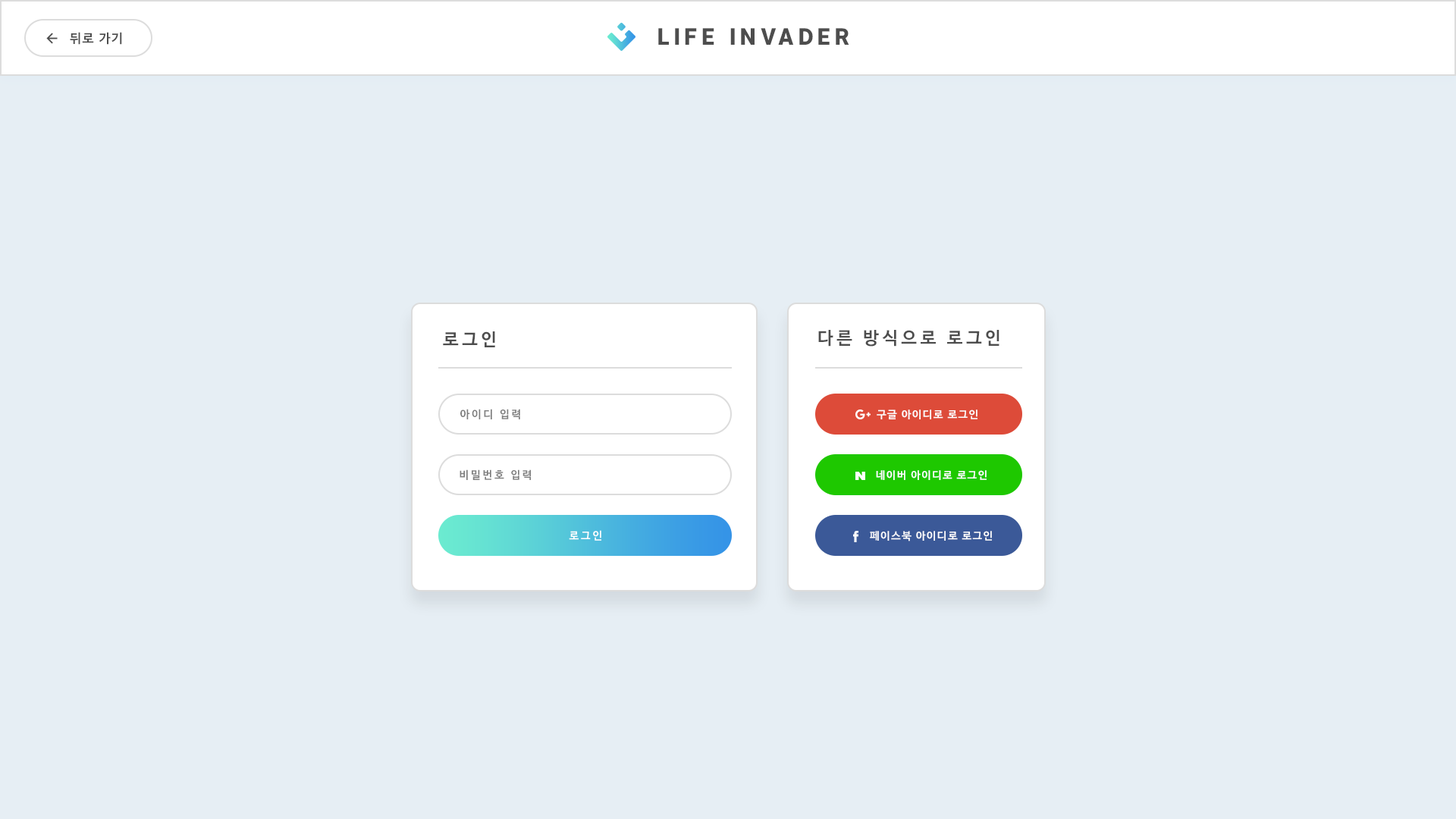
<style>
.page{position:relative;width:1456px;height:819px;background:#e6eef4}
.page>*{position:absolute;margin:0}
.t1{font:22.5px "InterUI-Black";letter-spacing:0.2em;color:#4d4d4d}
.t2{font:12.6px "NanumBarunGothicBold";letter-spacing:0.1em;color:#4d4d4d}
.t3{font:17.5px "NanumBarunGothicBold";letter-spacing:0.2em;color:#4d4d4d}
.t4{font:10.8px "NanumBarunGothicBold";letter-spacing:0.2em;color:#7e7e7e}
.t5{font:10.5px "NanumBarunGothicBold";letter-spacing:0.1em;color:#fefefe}
.t6{font:10.8px "NanumBarunGothicBold";letter-spacing:0.2em;color:#ffffff}
</style>
<div class="page">
<p class="t1" style="left:658px;top:28px;width:191px;height:17px">LIFE INVADER</p>
<p class="t2" style="left:70px;top:32px;width:52px;height:13px">뒤로 가기</p>
<p class="t3" style="left:818px;top:330px;width:181px;height:17px">다른 방식으로 로그인</p>
<p class="t3" style="left:443px;top:331px;width:52px;height:16px">로그인</p>
<p class="t4" style="left:460px;top:409px;width:60px;height:10px">아이디 입력</p>
<p class="t5" style="left:877px;top:409px;width:100px;height:10px">구글 아이디로 로그인</p>
<p class="t4" style="left:460px;top:469px;width:71px;height:11px">비밀번호 입력</p>
<p class="t5" style="left:876px;top:470px;width:111px;height:10px">네이버 아이디로 로그인</p>
<p class="t6" style="left:569px;top:530px;width:32px;height:11px">로그인</p>
<p class="t5" style="left:870px;top:531px;width:122px;height:10px">페이스북 아이디로 로그인</p>
</div>
